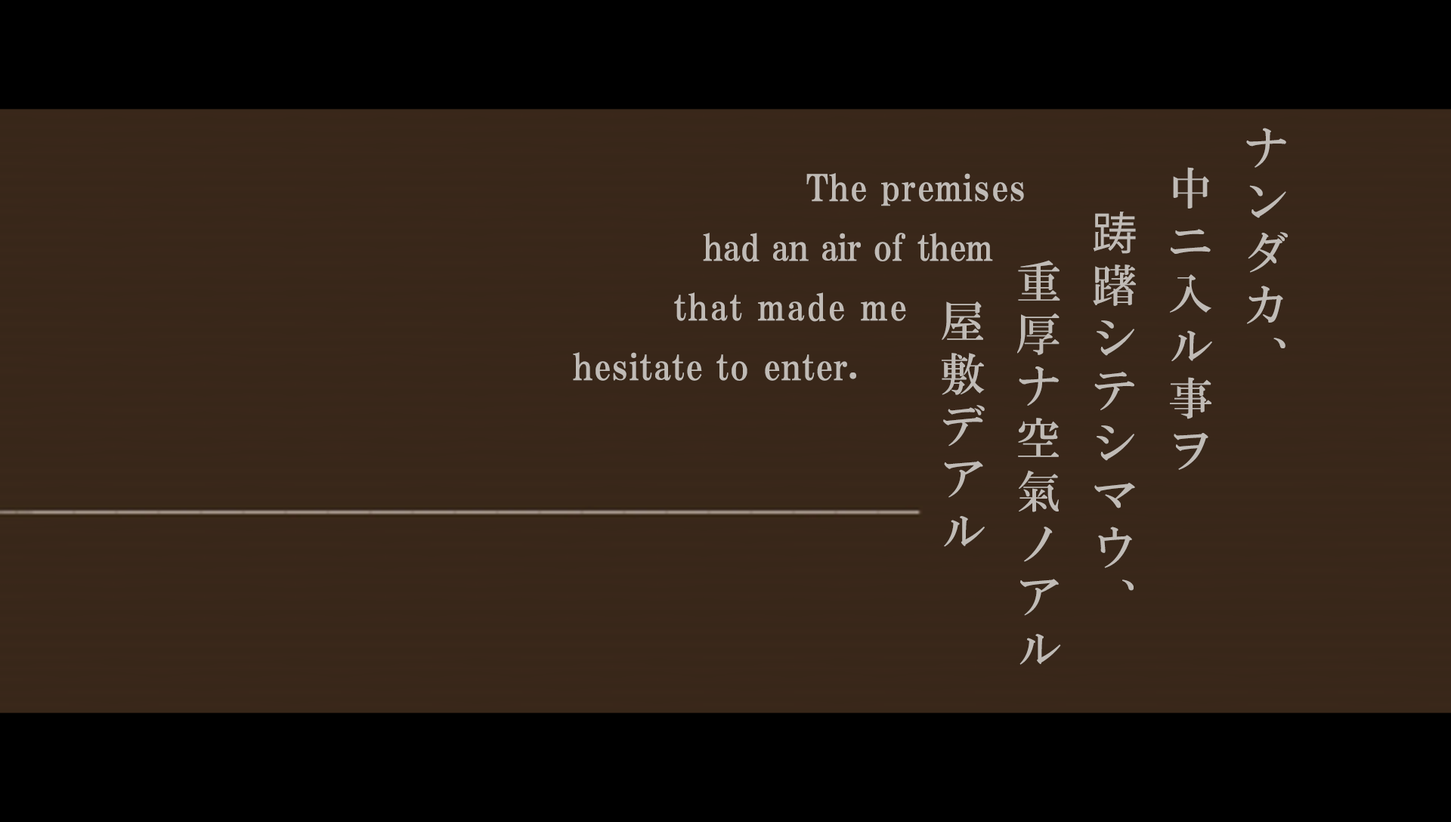
<style>
.page{position:relative;width:1451px;height:822px;background:#382719}
.page>*{position:absolute;margin:0}
.t1{font:44.9px/75.8px "HGMinchoB";letter-spacing:0.17em;color:#c0bbb6}
.t2{font:44.9px/75.8px "KozGoPr6N-Regular";letter-spacing:0.17em;color:#c0bbb6}
.t3{font:36.3px/59.7px "HGPMinchoE";letter-spacing:-0.01em;color:#c0bbb6}
.t4{font:36.3px/59.7px "HGPMinchoE";letter-spacing:0.025em;color:#c0bbb6}
.t5{font:36.3px/59.7px "HGPMinchoE";letter-spacing:0.05em;color:#c0bbb6}
</style>
<div class="page">
<p class="t1" style="left:941px;top:128px;width:346px;height:537px">ナンダカ、<br> 中ニ入ル事ヲ<br> <span class="t2">踌</span>躇シテシマウ、<br> 重厚ナ空氣ノアル<br> 屋敷デアル</p>
<p class="t3" style="left:573px;top:173px;width:451px;height:208px;text-align:right"><span class="t4">  The premises<br></span>had an air of them   <br><span class="t5">that made me  </span><span class="t4">       <br>hesitate to enter.</span></p>
</div>
